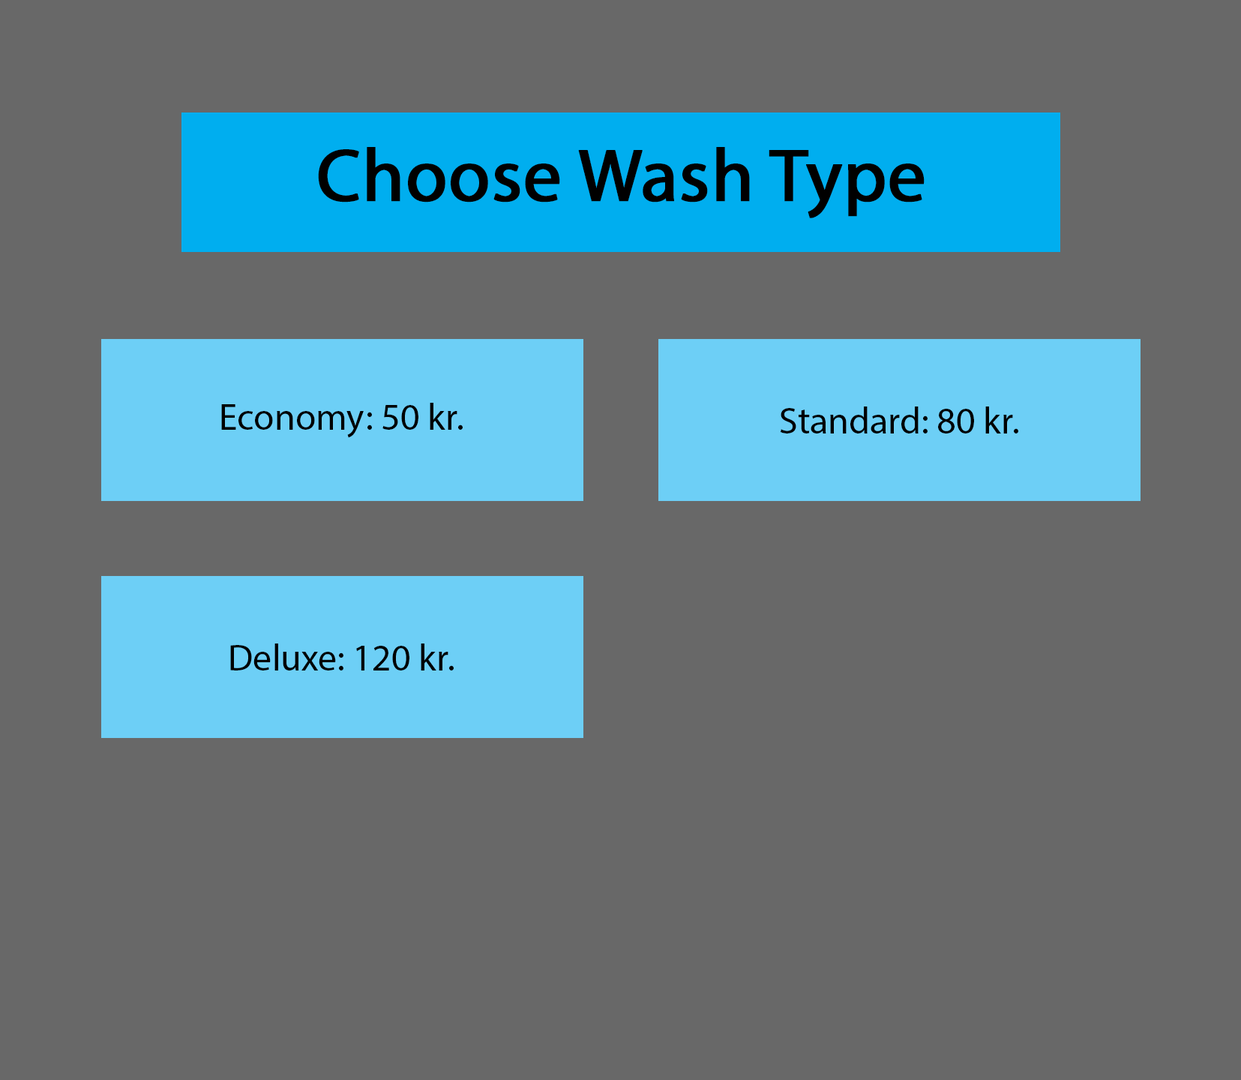
<style>
.page{position:relative;width:1241px;height:1080px;background:#686868}
.page>*{position:absolute;margin:0}
.t1{font:75px "MyriadPro-Regular";color:#000000;font-weight:bold}
.t2{font:9px "MyriadPro-Regular";color:#000000}
</style>
<div class="page">
<p class="t1" style="left:318px;top:147px;width:607px;height:71px">Choose Wash Type</p>
<p class="t2" style="left:221px;top:403px;width:242px;height:35px">Economy: 50 kr.</p>
<p class="t2" style="left:780px;top:406px;width:238px;height:28px">Standard: 80 kr.</p>
<p class="t2" style="left:230px;top:644px;width:224px;height:26px">Deluxe: 120 kr.</p>
</div>
